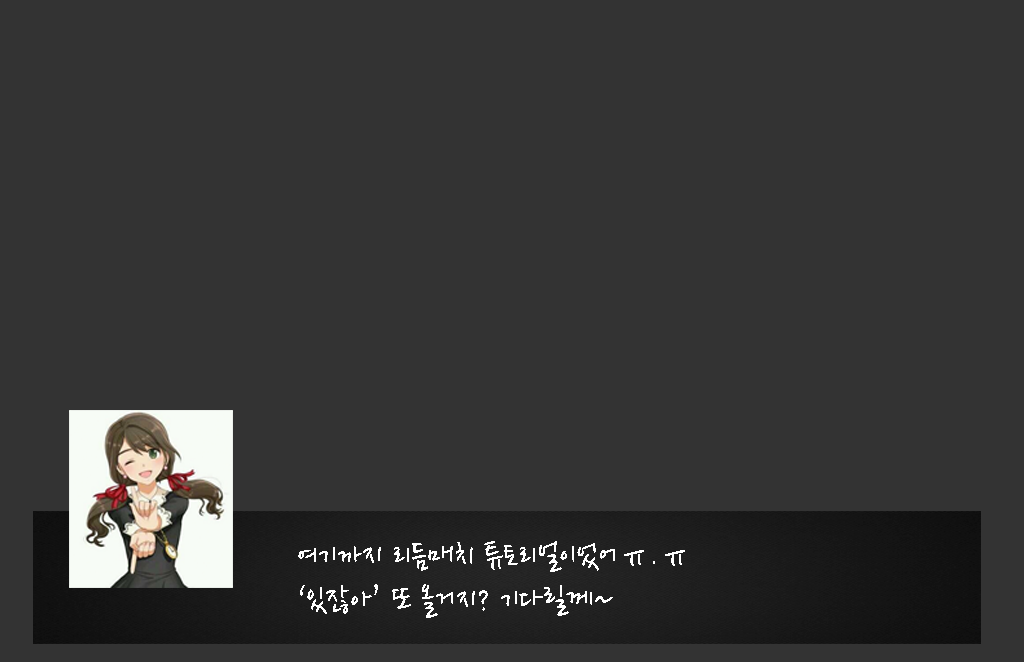
<style>
.page{position:relative;width:1024px;height:662px;background:#333333}
.page>*{position:absolute;margin:0}
.t1{font:36px "NanumPen";color:#ffffff}
</style>
<div class="page">
<p class="t1" style="left:298px;top:541px;width:387px;height:77px">여기까지 리듬매치 튜토리얼이었어ㅠ.ㅠ<br>‘있잖아’ 또 올거지? 기다릴께~</p>
</div>
